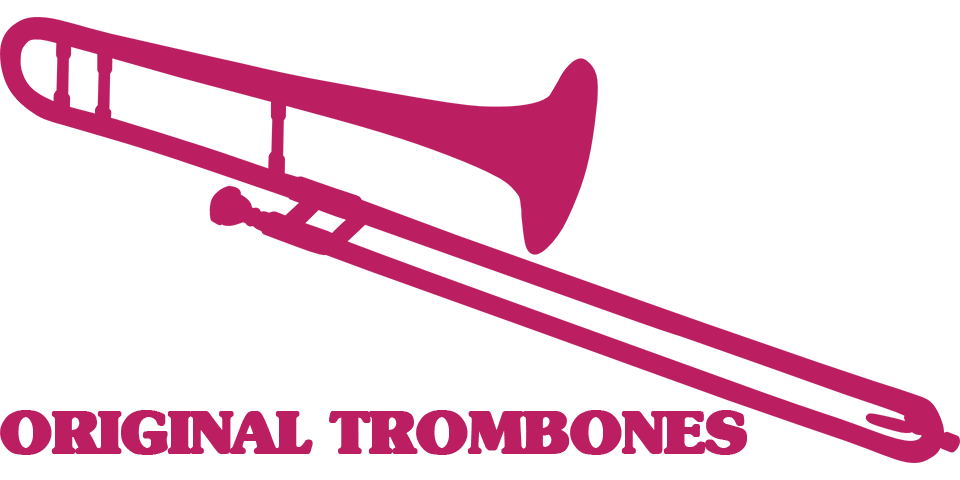
<style>
.page{position:relative;width:960px;height:480px;background:#ffffff}
.page>*{position:absolute;margin:0}
.t1{font:60px "Subway-Black";letter-spacing:-0.05em;color:#bc1e62;text-transform:uppercase;font-weight:bold}
</style>
<div class="page">
<p class="t1" style="left:0px;top:410px;width:747px;height:45px">Original trombones</p>
</div>
